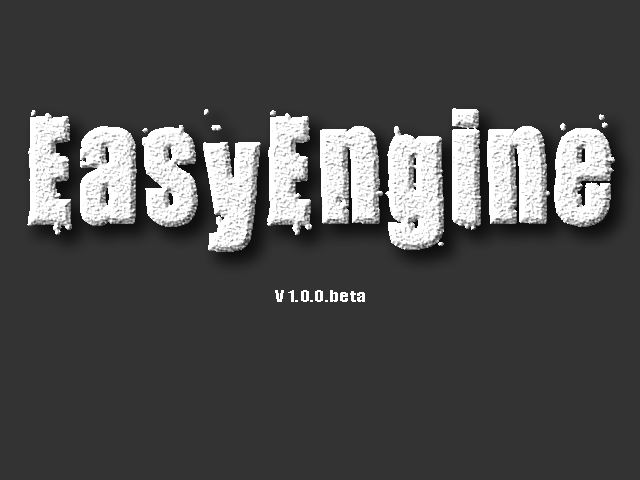
<style>
.page{position:relative;width:640px;height:480px;background:#333333}
.page>*{position:absolute;margin:0}
.t1{font:130px "321impact";letter-spacing:0.02em;color:#ffffff;font-weight:bold;scale:0.82 1}
.t2{font:14.7px "Impact";letter-spacing:0.02em;color:#ffffff;scale:1.3 1}
</style>
<div class="page">
<p class="t1" style="left:27px;top:108px;width:588px;height:144px">EasyEngine</p>
<p class="t2" style="left:275px;top:290px;width:90px;height:12px">V 1.0.0.beta</p>
</div>
